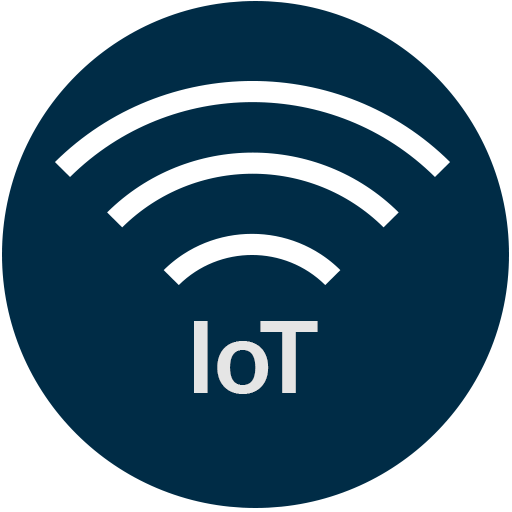
<style>
.page{position:relative;width:512px;height:512px;background:#002c46}
.page>*{position:absolute;margin:0}
.t1{font:100px "Lato-Bold";color:#e5e5e5}
</style>
<div class="page">
<p class="t1" style="left:194px;top:321px;width:124px;height:73px">IoT</p>
</div>
